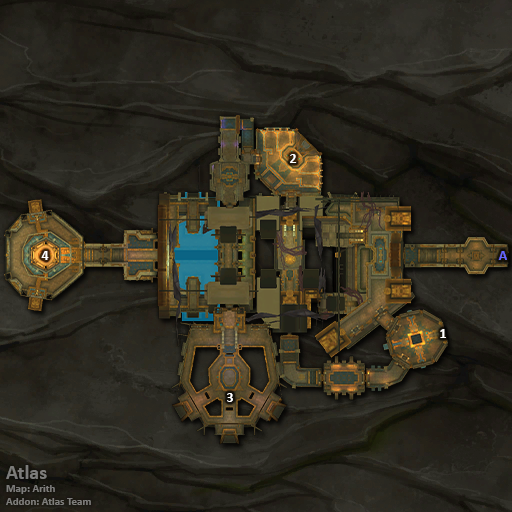
<style>
.page{position:relative;width:512px;height:512px}
.page>*{position:absolute;margin:0}
.t1{font:14px "Calibri-Bold";color:#ffffff}
.t2{font:14px "Calibri-Bold";color:#6666ff}
.t3{font:11px "Calibri-Bold";color:#7d7c7a}
.t4{font:20px "Calibri-Bold";color:#7d7c7a}
</style>
<div class="page">
<p class="t1" style="left:290px;top:154px;width:7px;height:9px">2</p>
<p class="t1" style="left:41px;top:251px;width:8px;height:9px">4</p>
<p class="t2" style="left:498px;top:251px;width:9px;height:9px">A</p>
<p class="t1" style="left:440px;top:329px;width:6px;height:9px">1</p>
<p class="t1" style="left:227px;top:393px;width:6px;height:9px">3</p>
<p class="t3" style="left:6px;top:465px;width:85px;height:40px"><span class="t4">Atlas<br></span>Map: Arith<br>Addon: Atlas Team</p>
</div>
